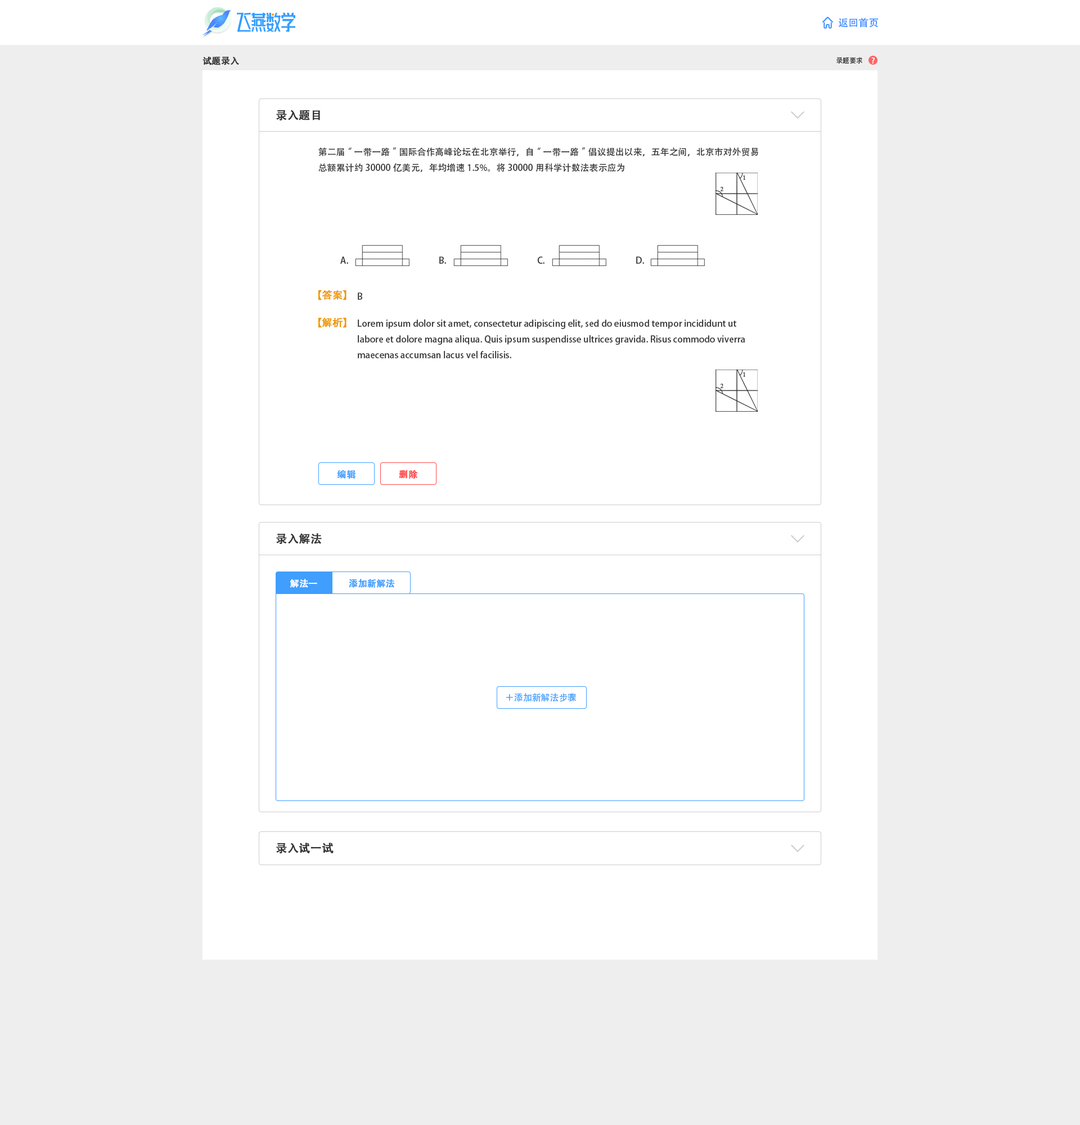
<style>
.page{position:relative;width:1080px;height:1125px;background:#ffffff}
.page>*{position:absolute;margin:0}
.t1{font:10.1px "AdobeHeitiStd-Regular";color:#408eff}
.t2{font:9px "AdobeHeitiStd-Regular";color:#333333;font-weight:bold}
.t3{font:6.8px "AdobeHeitiStd-Regular";color:#333333}
.t4{font:7.9px "AdobeHeitiStd-Regular";color:#ffffff}
.t5{font:11.2px "AdobeHeitiStd-Regular";color:#333333;font-weight:bold}
.t6{font:9px "AdobeHeitiStd-Regular";color:#333333}
.t7{font:10.1px "AdobeHeitiStd-Regular";color:#ee9900;font-weight:bold}
.t8{font:9px "AdobeHeitiStd-Regular";color:#409eff;font-weight:bold}
.t9{font:9px "AdobeHeitiStd-Regular";color:#ff4848;font-weight:bold}
.t10{font:9px "AdobeHeitiStd-Regular";color:#ffffff;font-weight:bold}
.t11{font:9px "AdobeHeitiStd-Regular";color:#409eff}
</style>
<div class="page">
<p class="t1" style="left:838px;top:17px;width:41px;height:11px">返回首页</p>
<p class="t2" style="left:202px;top:56px;width:37px;height:9px">试题录入</p>
<p class="t3" style="left:836px;top:57px;width:26px;height:7px">录题要求</p>
<p class="t4" style="left:871px;top:57px;width:4px;height:7px">?</p>
<p class="t5" style="left:276px;top:110px;width:44px;height:11px">录入题目</p>
<p class="t6" style="left:318px;top:147px;width:440px;height:25px">第二届“一带一路”国际合作高峰论坛在北京举行，自“一带一路”倡议提出以来，五年之间，北京市对外贸易总额累计约30000亿美元，年均增速1.5%。将30000用科学计数法表示应为</p>
<p class="t6" style="left:340px;top:256px;width:8px;height:8px">A.</p>
<p class="t6" style="left:439px;top:256px;width:7px;height:8px">B.</p>
<p class="t6" style="left:537px;top:256px;width:7px;height:8px">C.</p>
<p class="t6" style="left:636px;top:256px;width:8px;height:8px">D.</p>
<p class="t7" style="left:318px;top:290px;width:28px;height:10px">【答案】</p>
<p class="t6" style="left:358px;top:292px;width:5px;height:8px">B</p>
<p class="t7" style="left:318px;top:317px;width:28px;height:11px">【解析】</p>
<p class="t6" style="left:358px;top:319px;width:387px;height:39px">Lorem ipsum dolor sit amet, consectetur adipiscing elit, sed do eiusmod tempor incididunt ut labore et dolore magna aliqua. Quis ipsum suspendisse ultrices gravida. Risus commodo viverra maecenas accumsan lacus vel facilisis.</p>
<p class="t8" style="left:337px;top:470px;width:19px;height:9px">编辑</p>
<p class="t9" style="left:399px;top:470px;width:19px;height:9px">删除</p>
<p class="t5" style="left:276px;top:533px;width:46px;height:11px">录入解法</p>
<p class="t10" style="left:290px;top:579px;width:27px;height:9px">解法一</p>
<p class="t8" style="left:349px;top:579px;width:46px;height:9px">添加新解法</p>
<p class="t11" style="left:506px;top:693px;width:71px;height:9px">＋添加新解法步骤</p>
<p class="t5" style="left:276px;top:843px;width:58px;height:11px">录入试一试</p>
</div>
